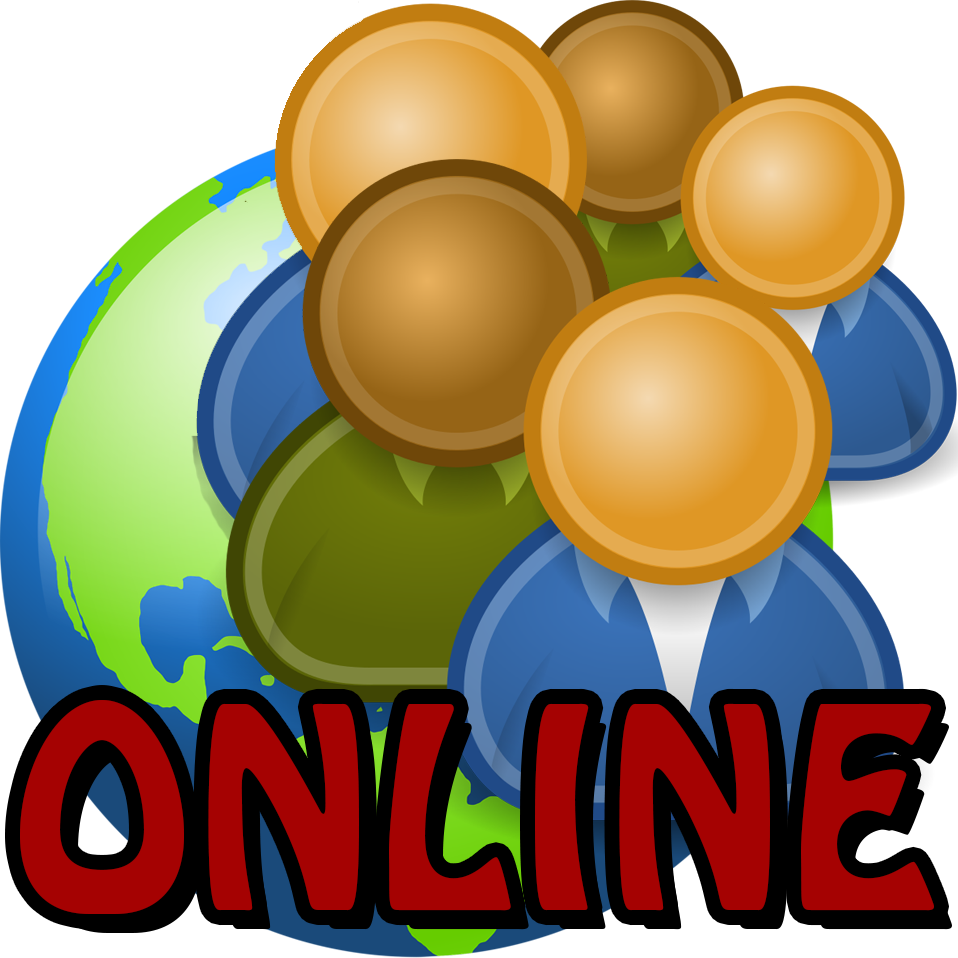
<style>
.page{position:relative;width:958px;height:958px}
.page>*{position:absolute;margin:0}
.t1{font:247.4px "HoboStd";letter-spacing:0.025em;color:#a50202}
</style>
<div class="page">
<p class="t1" style="left:20px;top:700px;width:914px;height:214px">ONLINE</p>
</div>
